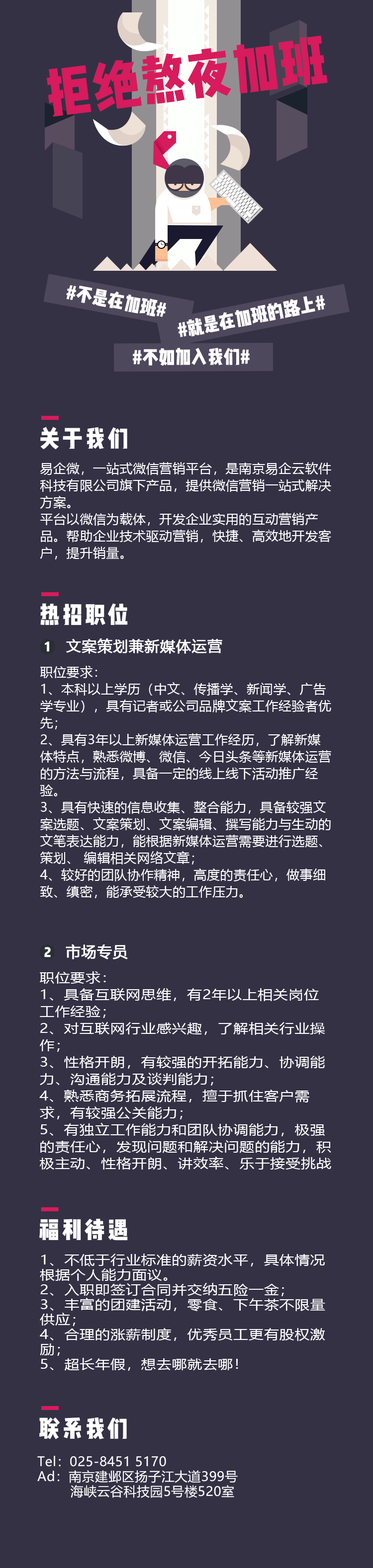
<style>
.page{position:relative;width:373px;height:1568px;background:#343145}
.page>*{position:absolute;margin:0}
.t1{font:54.5px "WenYue-XinQingNianTi-NC-W8";color:#d71b5d;text-transform:uppercase}
.t2{font:19px "WenYue-XinQingNianTi-NC-W8";color:#ffffff;text-transform:uppercase}
.t3{font:18.9px "WenYue-XinQingNianTi-NC-W8";color:#ffffff;text-transform:uppercase}
.t4{font:23.9px "WenYue-XinQingNianTi-NC-W8";letter-spacing:0.1em;color:#ffffff}
.t5{font:12.9px/16.9px "MicrosoftYaHeiUI";letter-spacing:0.025em;color:#ffffff;text-transform:uppercase}
.t6{font:12.9px "WenYue-XinQingNianTi-NC-W8";letter-spacing:0.1em;color:#ffffff}
.t7{font:14.9px "MicrosoftYaHeiUI";letter-spacing:0.025em;color:#ffffff;text-transform:uppercase;font-weight:bold}
.t8{font:12.9px/16.9px "MicrosoftYaHeiUI";letter-spacing:0.025em;color:#ffffff;text-transform:uppercase;scale:1.16 1}
.t9{font:12.9px/14.9px "MicrosoftYaHeiUI";letter-spacing:0.025em;color:#ffffff;text-transform:uppercase;scale:1.16 1}
.t10{font:12.9px/14.9px "MicrosoftYaHeiUI";letter-spacing:0.025em;color:#ffffff}
</style>
<div class="page">
<p class="t1" style="left:47px;top:35px;width:280px;height:82px;rotate:-7deg">拒绝熬夜加班</p>
<p class="t2" style="left:66px;top:285px;width:100px;height:32px;rotate:11deg">#不是在加班#</p>
<p class="t2" style="left:177px;top:295px;width:148px;height:42px;rotate:-11deg">#就是在加班的路上#</p>
<p class="t3" style="left:133px;top:348px;width:116px;height:18px">#不如加入我们#</p>
<p class="t4" style="left:40px;top:427px;width:87px;height:23px">关于我们</p>
<p class="t5" style="left:40px;top:462px;width:291px;height:97px">易企微，一站式微信营销平台，是南京易企云软件科技有限公司旗下产品，提供微信营销一站式解决方案。<br>平台以微信为载体，开发企业实用的互动营销产品。帮助企业技术驱动营销，快捷、高效地开发客户，提升销量。</p>
<p class="t4" style="left:40px;top:603px;width:88px;height:22px">热招职位</p>
<p class="t6" style="left:45px;top:641px;width:4px;height:11px">1</p>
<p class="t7" style="left:66px;top:638px;width:156px;height:16px">文案策划兼新媒体运营</p>
<p class="t5" style="left:40px;top:666px;width:291px;height:232px">职位要求：<br>1、本科以上学历（中文、传播学、新闻学、广告学专业），具有记者或公司品牌文案工作经验者优先；<br>2、具有3年以上新媒体运营工作经历，了解新媒体特点，熟悉微博、微信、今日头条等新媒体运营的方法与流程，具备一定的线上线下活动推广经验。<br>3、具有快速的信息收集、整合能力，具备较强文案选题、文案策划、文案编辑、撰写能力与生动的文笔表达能力，能根据新媒体运营需要进行选题、策划、 编辑相关网络文章；<br>4、较好的团队协作精神，高度的责任心，做事细致、缜密，能承受较大的工作压力。</p>
<p class="t6" style="left:44px;top:947px;width:7px;height:10px">2</p>
<p class="t7" style="left:66px;top:944px;width:62px;height:15px">市场专员</p>
<p class="t8" style="left:39px;top:971px;width:292px;height:199px">职位要求：<br>1、具备互联网思维，有2年以上相关岗位工作经验； <br>2、对互联网行业感兴趣，了解相关行业操作； <br>3、性格开朗，有较强的开拓能力、协调能力、沟通能力及谈判能力； <br>4、熟悉商务拓展流程，擅于抓住客户需求，有较强公关能力； <br>5、有独立工作能力和团队协调能力，极强的责任心，发现问题和解决问题的能力，积极主动、性格开朗、讲效率、乐于接受挑战</p>
<p class="t4" style="left:39px;top:1219px;width:89px;height:22px">福利待遇</p>
<p class="t9" style="left:40px;top:1254px;width:285px;height:117px">1、不低于行业标准的薪资水平，具体情况根据个人能力面议。<br>2、入职即签订合同并交纳五险一金；<br>3、丰富的团建活动，零食、下午茶不限量供应；<br>4、合理的涨薪制度，优秀员工更有股权激励；<br>5、超长年假，想去哪就去哪！</p>
<p class="t4" style="left:39px;top:1417px;width:88px;height:22px">联系我们</p>
<p class="t10" style="left:37px;top:1456px;width:200px;height:42px">Tel：025-8451 5170<br>Ad：南京建邺区扬子江大道399号<br>        海峡云谷科技园5号楼520室</p>
</div>
